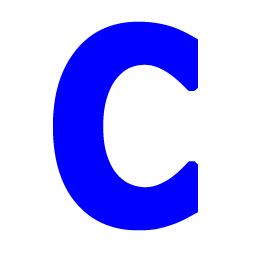
<style>
.page{position:relative;width:256px;height:256px;background:#ffffff}
.page>*{position:absolute;margin:0}
.t1{font:267.3px "Tahoma-Bold";color:#0000ff;text-transform:uppercase;font-weight:bold;scale:0.86 1}
</style>
<div class="page">
<p class="t1" style="left:53px;top:21px;width:145px;height:210px">C</p>
</div>
